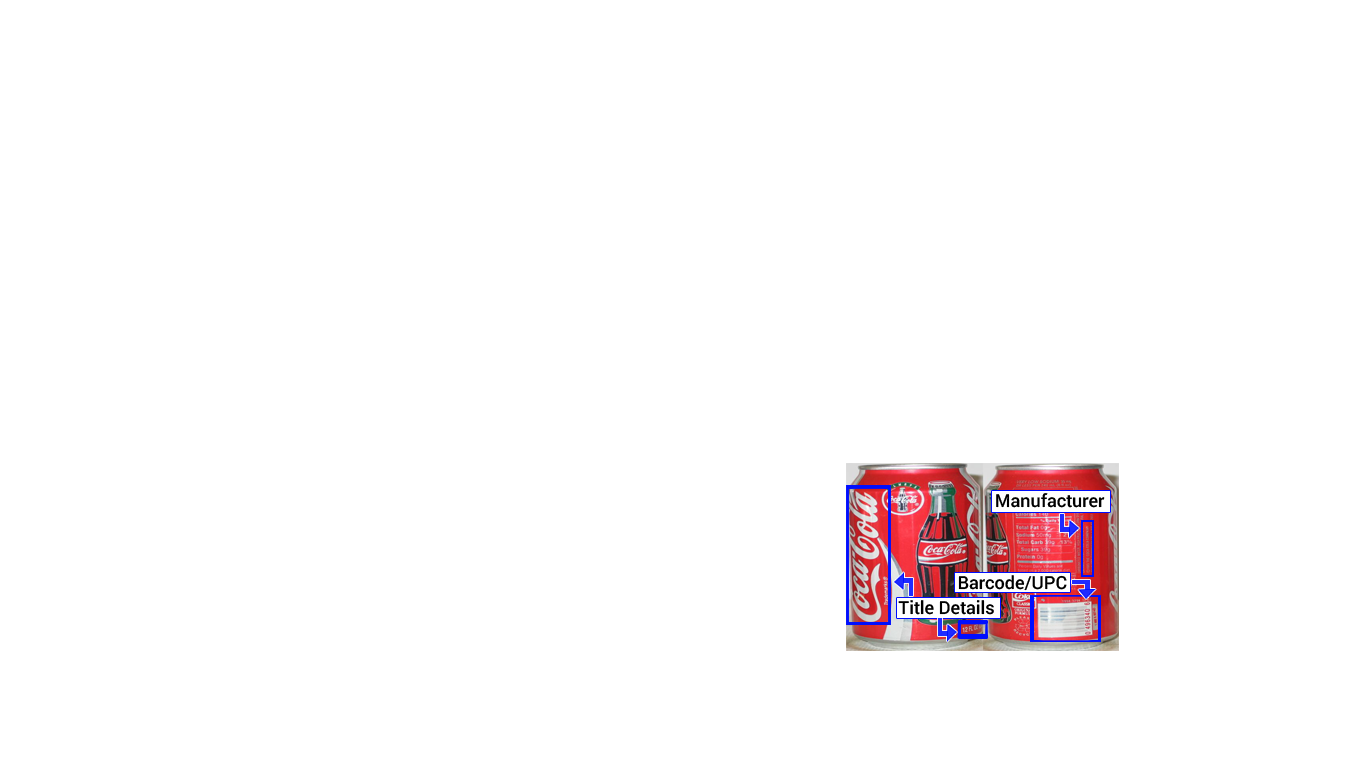
<style>
.page{position:relative;width:1366px;height:768px;background:#ffffff}
.page>*{position:absolute;margin:0}
.t1{font:18px "Roboto-Medium";color:#000000}
</style>
<div class="page">
<p class="t1" style="left:996px;top:493px;width:109px;height:15px">Manufacturer</p>
<p class="t1" style="left:958px;top:575px;width:109px;height:16px">Barcode/UPC</p>
<p class="t1" style="left:898px;top:600px;width:96px;height:15px">Title Details</p>
</div>
